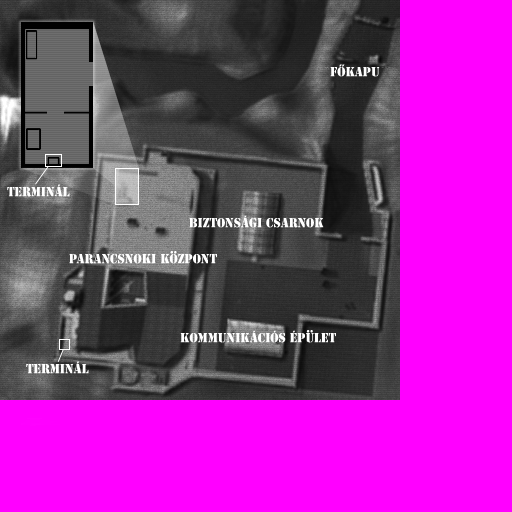
<style>
.page{position:relative;width:512px;height:512px;background:#ff00ff}
.page>*{position:absolute;margin:0}
.t1{font:12.2px "StencilStd";color:#ffffff;scale:0.94 1}
</style>
<div class="page">
<p class="t1" style="left:330px;top:64px;width:50px;height:13px">FŐKAPU</p>
<p class="t1" style="left:7px;top:184px;width:63px;height:13px">TERMINÁL</p>
<p class="t1" style="left:189px;top:215px;width:135px;height:13px">BIZTONSÁGI CSARNOK</p>
<p class="t1" style="left:69px;top:251px;width:148px;height:13px">PARANCSNOKI KÖZPONT</p>
<p class="t1" style="left:180px;top:330px;width:156px;height:13px">KOMMUNIKÁCIÓS ÉPÜLET</p>
<p class="t1" style="left:26px;top:361px;width:63px;height:13px">TERMINÁL</p>
</div>
